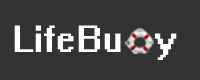
<style>
.page{position:relative;width:200px;height:80px;background:#333333}
.page>*{position:absolute;margin:0}
.t1{font:34px "System";color:#fefefe}
</style>
<div class="page">
<p class="t1" style="left:14px;top:25px;width:163px;height:35px">LifeBu   y</p>
</div>
